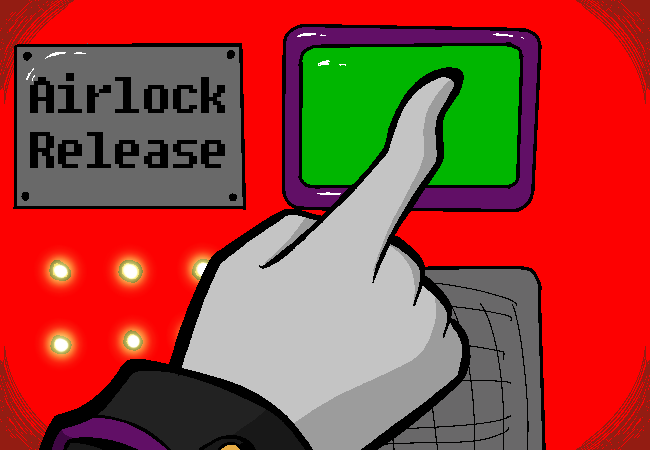
<style>
.page{position:relative;width:650px;height:450px;background:#fd0101}
.page>*{position:absolute;margin:0}
.t1{font:45.8px "Fixedsys";color:#000000}
</style>
<div class="page">
<p class="t1" style="left:30px;top:73px;width:195px;height:95px">Airlock<br>Release</p>
</div>
